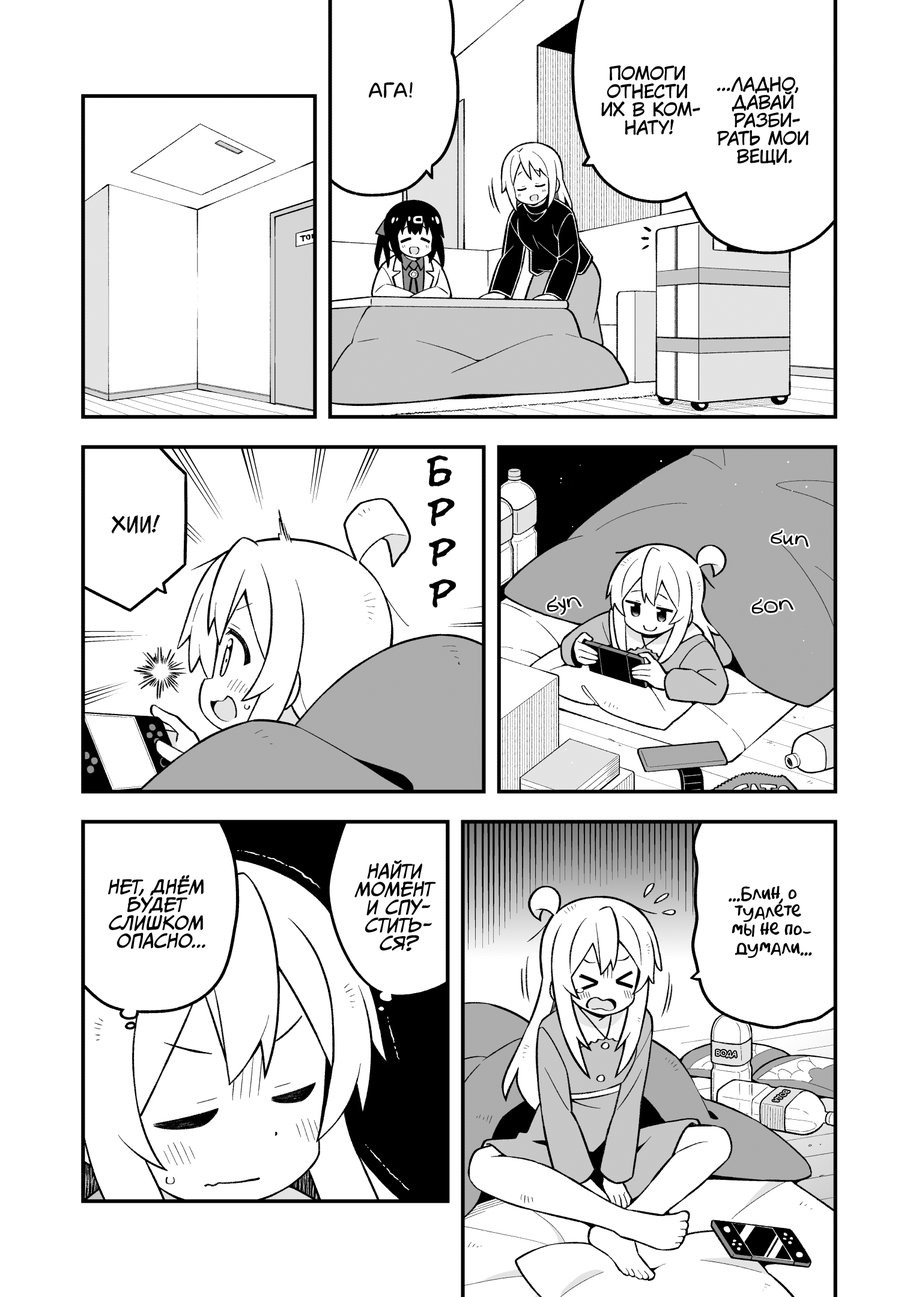
<style>
.page{position:relative;width:919px;height:1297px;background:#ffffff}
.page>*{position:absolute;margin:0}
.t1{font:18px "KuraiVoice2";color:#000000;text-transform:uppercase}
.t2{font:21.6px "laCartoonerie";color:#000000;text-transform:uppercase}
.t3{font:43.2px "el_CCEvilSchemes";color:#000000}
.t4{font:21.6px "v_CCJeffCampbell";color:#000000;text-transform:uppercase}
.t5{font:21.6px "v_Augie";color:#000000}
.t6{font:18px "CCMeanwhile";color:#000000;text-transform:uppercase;font-style:italic}
.t7{font:18px "AkbarPlain";color:#000000}
.t8{font:7.2px "v_CCMonologous";color:#ffffff;text-transform:uppercase}
</style>
<div class="page">
<p class="t1" style="left:601px;top:65px;width:99px;height:70px;text-align:center">Помоги<br>отнести<br>их в ком-<br>нату!</p>
<p class="t1" style="left:717px;top:76px;width:92px;height:89px;text-align:center">...ладно,<br>давай<br>разби-<br>рать мои<br>вещи.</p>
<p class="t2" style="left:369px;top:82px;width:44px;height:17px">Ага!</p>
<p class="t3" style="left:427px;top:455px;width:25px;height:32px">б</p>
<p class="t3" style="left:428px;top:498px;width:27px;height:29px">р</p>
<p class="t4" style="left:111px;top:515px;width:49px;height:19px">Хии!</p>
<p class="t5" style="left:771px;top:530px;width:38px;height:17px;rotate:4deg">бип</p>
<p class="t3" style="left:429px;top:538px;width:27px;height:29px">р</p>
<p class="t3" style="left:429px;top:579px;width:27px;height:29px">р</p>
<p class="t5" style="left:547px;top:596px;width:35px;height:19px;rotate:-11deg">буп</p>
<p class="t5" style="left:751px;top:599px;width:43px;height:15px;rotate:-8deg">боп</p>
<p class="t6" style="left:354px;top:860px;width:82px;height:91px;text-align:center">Найти<br>момент<br>и спу-<br>стить-<br>ся?</p>
<p class="t6" style="left:108px;top:875px;width:97px;height:74px;text-align:center">Нет, днём<br>будет<br>слишком<br>опасно...</p>
<p class="t7" style="left:729px;top:886px;width:83px;height:73px;text-align:center">...Блин, о<br>туалете<br>мы не по-<br>думали...</p>
<p class="t8" style="left:716px;top:1050px;width:20px;height:8px;rotate:5deg">вода</p>
</div>
